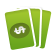
<style>
.page{position:relative;width:56px;height:56px;background:#ffffff}
.page>*{position:absolute;margin:0}
.t1{font:12.8px "DIN-Black";color:#ededed}
</style>
<div class="page">
<p class="t1" style="left:13px;top:26px;width:13px;height:8px;rotate:-103deg">$</p>
</div>
